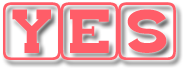
<style>
.page{position:relative;width:184px;height:69px;background:#ff5d68}
.page>*{position:absolute;margin:0}
.t1{font:48px "babybloc";color:#ff5d68}
</style>
<div class="page">
<p class="t1" style="left:3px;top:2px;width:173px;height:58px">YES</p>
</div>
